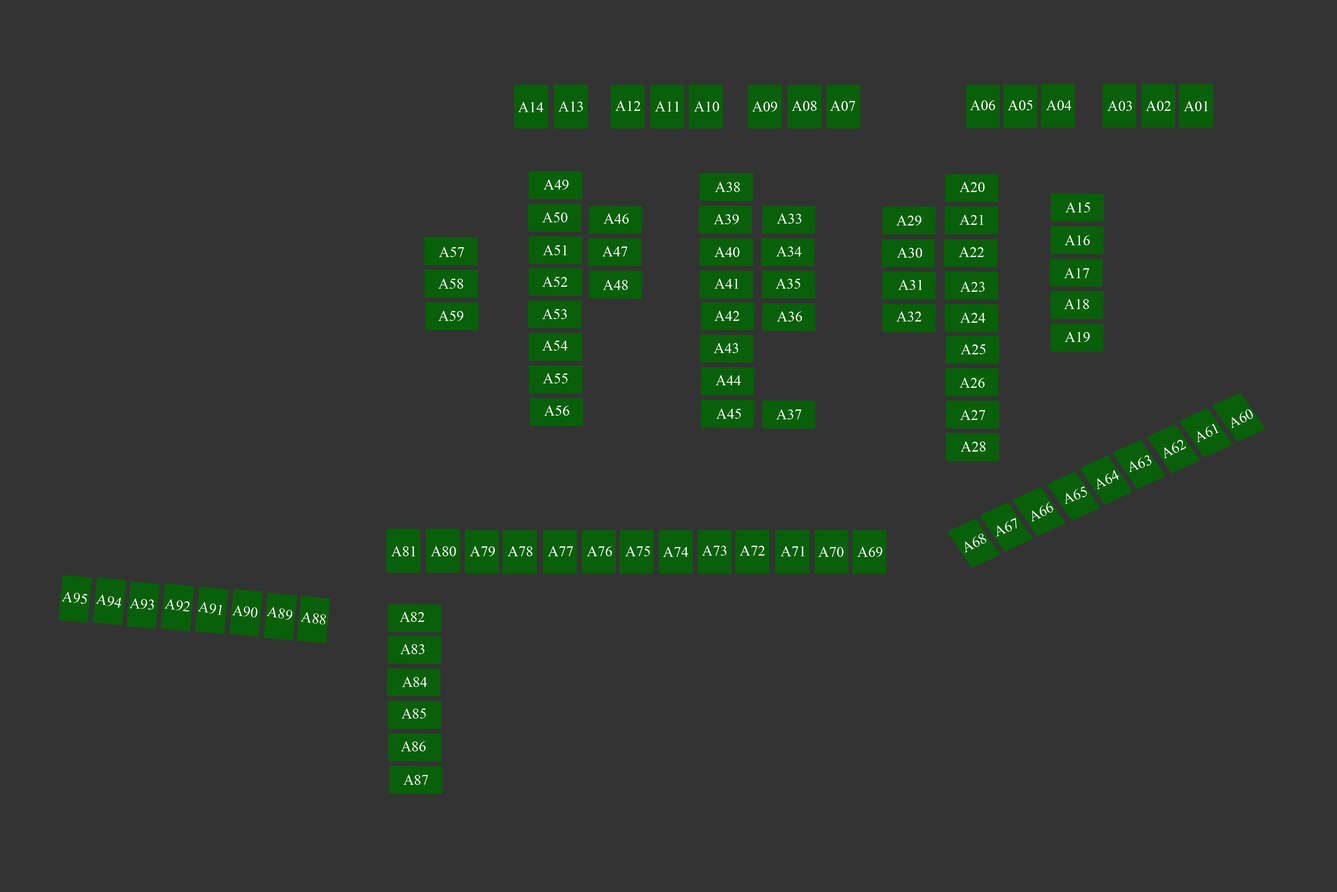
<style>
.page{position:relative;width:1337px;height:892px;background:#333333}
.page>*{position:absolute;margin:0}
.t1{font:14.9px "TimesNewRomanPSMT";color:#ffffff}
.t2{font:14.9px "TimesNewRomanPSMT";color:#fdf8f8}
</style>
<div class="page">
<p class="t1" style="left:518px;top:102px;width:26px;height:10px">A14</p>
<p class="t1" style="left:558px;top:101px;width:25px;height:10px">A13</p>
<p class="t1" style="left:615px;top:101px;width:26px;height:10px">A12</p>
<p class="t1" style="left:655px;top:101px;width:24px;height:10px">A11</p>
<p class="t1" style="left:694px;top:101px;width:25px;height:10px">A10</p>
<p class="t1" style="left:752px;top:101px;width:25px;height:10px">A09</p>
<p class="t1" style="left:792px;top:101px;width:25px;height:10px">A08</p>
<p class="t1" style="left:830px;top:101px;width:25px;height:10px">A07</p>
<p class="t1" style="left:970px;top:100px;width:26px;height:10px">A06</p>
<p class="t1" style="left:1008px;top:100px;width:25px;height:10px">A05</p>
<p class="t1" style="left:1046px;top:100px;width:26px;height:10px">A04</p>
<p class="t1" style="left:1108px;top:101px;width:24px;height:10px">A03</p>
<p class="t1" style="left:1146px;top:101px;width:25px;height:10px">A02</p>
<p class="t1" style="left:1184px;top:101px;width:24px;height:10px">A01</p>
<p class="t1" style="left:544px;top:179px;width:25px;height:10px">A49</p>
<p class="t1" style="left:715px;top:182px;width:25px;height:10px">A38</p>
<p class="t1" style="left:960px;top:182px;width:25px;height:10px">A20</p>
<p class="t1" style="left:1066px;top:202px;width:24px;height:10px">A15</p>
<p class="t1" style="left:542px;top:212px;width:26px;height:10px">A50</p>
<p class="t1" style="left:604px;top:213px;width:25px;height:11px">A46</p>
<p class="t1" style="left:714px;top:214px;width:25px;height:10px">A39</p>
<p class="t1" style="left:777px;top:213px;width:25px;height:11px">A33</p>
<p class="t1" style="left:897px;top:215px;width:25px;height:10px">A29</p>
<p class="t1" style="left:960px;top:215px;width:24px;height:10px">A21</p>
<p class="t1" style="left:543px;top:245px;width:24px;height:10px">A51</p>
<p class="t1" style="left:1065px;top:235px;width:25px;height:10px">A16</p>
<p class="t1" style="left:439px;top:247px;width:25px;height:10px">A57</p>
<p class="t1" style="left:602px;top:246px;width:26px;height:10px">A47</p>
<p class="t1" style="left:715px;top:247px;width:25px;height:10px">A40</p>
<p class="t1" style="left:776px;top:246px;width:26px;height:10px">A34</p>
<p class="t1" style="left:897px;top:247px;width:26px;height:11px">A30</p>
<p class="t1" style="left:959px;top:247px;width:25px;height:10px">A22</p>
<p class="t1" style="left:1064px;top:268px;width:25px;height:10px">A17</p>
<p class="t1" style="left:438px;top:278px;width:25px;height:11px">A58</p>
<p class="t1" style="left:542px;top:276px;width:25px;height:11px">A52</p>
<p class="t1" style="left:603px;top:280px;width:25px;height:10px">A48</p>
<p class="t1" style="left:715px;top:278px;width:24px;height:11px">A41</p>
<p class="t1" style="left:776px;top:278px;width:25px;height:11px">A35</p>
<p class="t1" style="left:898px;top:280px;width:25px;height:10px">A31</p>
<p class="t1" style="left:960px;top:281px;width:25px;height:11px">A23</p>
<p class="t1" style="left:1064px;top:299px;width:25px;height:10px">A18</p>
<p class="t1" style="left:438px;top:311px;width:25px;height:10px">A59</p>
<p class="t1" style="left:542px;top:309px;width:25px;height:10px">A53</p>
<p class="t1" style="left:715px;top:311px;width:25px;height:10px">A42</p>
<p class="t1" style="left:777px;top:311px;width:25px;height:10px">A36</p>
<p class="t1" style="left:897px;top:311px;width:25px;height:10px">A32</p>
<p class="t1" style="left:960px;top:312px;width:26px;height:11px">A24</p>
<p class="t1" style="left:542px;top:340px;width:26px;height:10px">A54</p>
<p class="t1" style="left:1065px;top:332px;width:25px;height:10px">A19</p>
<p class="t1" style="left:714px;top:343px;width:24px;height:10px">A43</p>
<p class="t1" style="left:961px;top:344px;width:25px;height:10px">A25</p>
<p class="t1" style="left:543px;top:373px;width:25px;height:10px">A55</p>
<p class="t1" style="left:716px;top:375px;width:25px;height:10px">A44</p>
<p class="t1" style="left:960px;top:377px;width:25px;height:11px">A26</p>
<p class="t1" style="left:544px;top:405px;width:26px;height:10px">A56</p>
<p class="t1" style="left:716px;top:408px;width:25px;height:11px">A45</p>
<p class="t1" style="left:776px;top:409px;width:26px;height:10px">A37</p>
<p class="t1" style="left:960px;top:410px;width:25px;height:10px">A27</p>
<p class="t1" style="left:1232px;top:409px;width:21px;height:19px;rotate:-25deg">A60</p>
<p class="t1" style="left:1198px;top:423px;width:21px;height:19px;rotate:-25deg">A61</p>
<p class="t1" style="left:961px;top:441px;width:25px;height:10px">A28</p>
<p class="t1" style="left:1165px;top:440px;width:21px;height:18px;rotate:-27deg">A62</p>
<p class="t1" style="left:1130px;top:455px;width:22px;height:17px;rotate:-20deg">A63</p>
<p class="t1" style="left:1097px;top:470px;width:22px;height:19px;rotate:-26deg">A64</p>
<p class="t1" style="left:1065px;top:486px;width:22px;height:18px;rotate:-20deg">A65</p>
<p class="t1" style="left:1032px;top:502px;width:22px;height:20px;rotate:-26deg">A66</p>
<p class="t1" style="left:997px;top:518px;width:20px;height:19px;rotate:-23deg">A67</p>
<p class="t1" style="left:965px;top:533px;width:22px;height:20px;rotate:-27deg">A68</p>
<p class="t1" style="left:391px;top:546px;width:24px;height:10px">A81</p>
<p class="t1" style="left:431px;top:546px;width:25px;height:10px">A80</p>
<p class="t1" style="left:470px;top:546px;width:25px;height:10px">A79</p>
<p class="t1" style="left:508px;top:546px;width:25px;height:10px">A78</p>
<p class="t1" style="left:548px;top:546px;width:25px;height:10px">A77</p>
<p class="t1" style="left:587px;top:546px;width:25px;height:10px">A76</p>
<p class="t1" style="left:625px;top:546px;width:25px;height:10px">A75</p>
<p class="t1" style="left:702px;top:545px;width:25px;height:10px">A73</p>
<p class="t1" style="left:740px;top:545px;width:25px;height:10px">A72</p>
<p class="t1" style="left:781px;top:546px;width:24px;height:10px">A71</p>
<p class="t1" style="left:663px;top:546px;width:26px;height:11px">A74</p>
<p class="t1" style="left:819px;top:546px;width:25px;height:11px">A70</p>
<p class="t1" style="left:858px;top:546px;width:25px;height:11px">A69</p>
<p class="t2" style="left:62px;top:591px;width:26px;height:13px;rotate:7deg">A95</p>
<p class="t2" style="left:96px;top:594px;width:25px;height:14px;rotate:10deg">A94</p>
<p class="t2" style="left:129px;top:598px;width:25px;height:12px;rotate:5deg">A93</p>
<p class="t2" style="left:164px;top:599px;width:26px;height:12px;rotate:8deg">A92</p>
<p class="t2" style="left:198px;top:602px;width:24px;height:13px;rotate:9deg">A91</p>
<p class="t2" style="left:232px;top:605px;width:26px;height:12px;rotate:5deg">A90</p>
<p class="t2" style="left:267px;top:606px;width:26px;height:13px;rotate:11deg">A89</p>
<p class="t2" style="left:301px;top:612px;width:25px;height:12px;rotate:8deg">A88</p>
<p class="t2" style="left:400px;top:611px;width:24px;height:11px">A82</p>
<p class="t2" style="left:400px;top:644px;width:24px;height:10px">A83</p>
<p class="t2" style="left:402px;top:676px;width:25px;height:11px">A84</p>
<p class="t2" style="left:402px;top:708px;width:24px;height:10px">A85</p>
<p class="t2" style="left:401px;top:741px;width:25px;height:10px">A86</p>
<p class="t2" style="left:403px;top:774px;width:25px;height:10px">A87</p>
</div>
